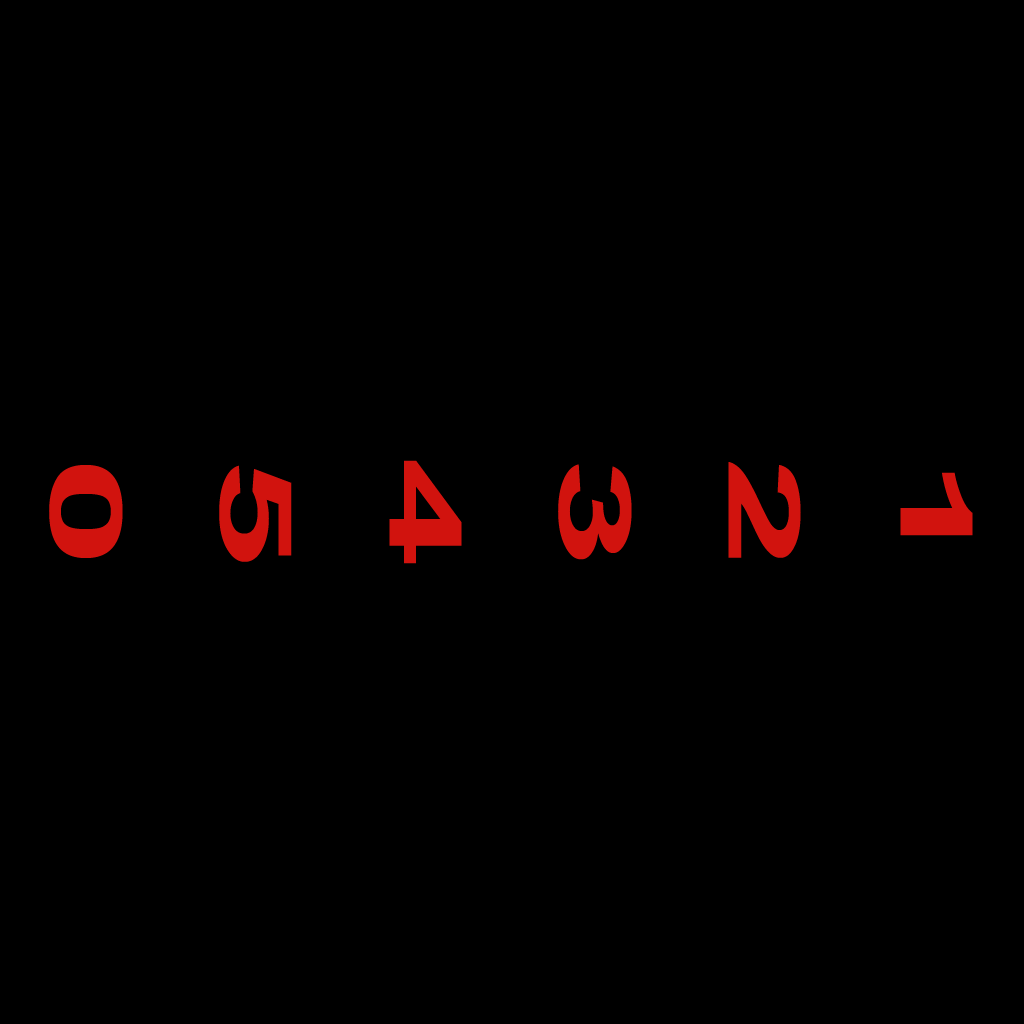
<style>
.page{position:relative;width:1024px;height:1024px;background:#000000}
.page>*{position:absolute;margin:0}
.t1{font:100px "Arial-BoldMT";color:#d1130e;scale:1.99 1}
</style>
<div class="page">
<p class="t1" style="left:389px;top:460px;width:73px;height:104px;rotate:90deg">4</p>
<p class="t1" style="left:728px;top:462px;width:73px;height:96px;rotate:90deg">2</p>
<p class="t1" style="left:49px;top:465px;width:74px;height:93px;rotate:90deg">0</p>
<p class="t1" style="left:219px;top:465px;width:73px;height:97px;rotate:90deg">5</p>
<p class="t1" style="left:558px;top:464px;width:74px;height:96px;rotate:90deg">3</p>
<p class="t1" style="left:900px;top:472px;width:73px;height:64px;rotate:90deg">1</p>
</div>
